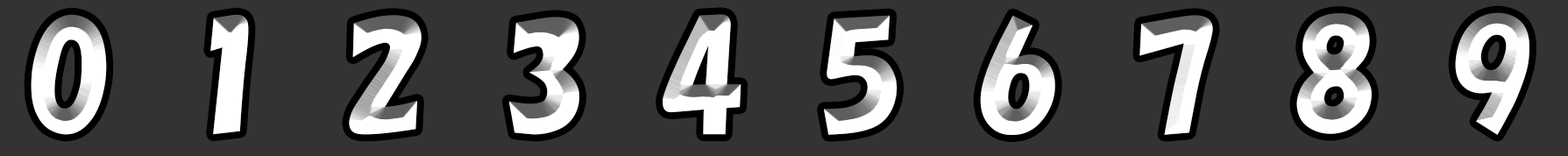
<style>
.page{position:relative;width:1568px;height:156px;background:#333333}
.page>*{position:absolute;margin:0}
.t1{font:131.5px "HGPSoeiKakupoptai";letter-spacing:0.555em;color:#ffffff}
</style>
<div class="page">
<p class="t1" style="left:31px;top:12px;width:1498px;height:123px">0123456789</p>
</div>
